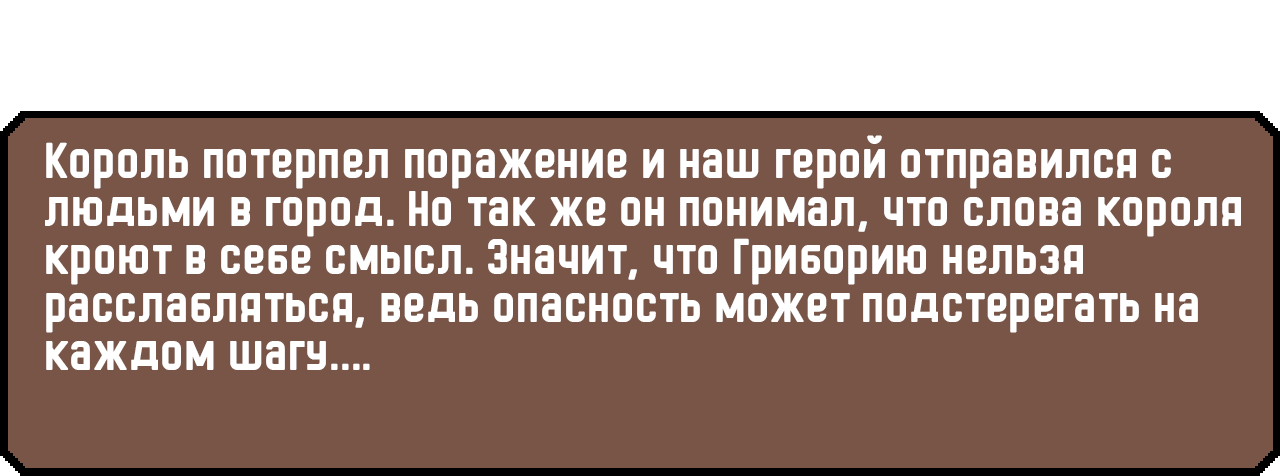
<style>
.page{position:relative;width:1280px;height:476px;background:#795548}
.page>*{position:absolute;margin:0}
.t1{font:48px/48px "HermanoMayor";color:#ffffff}
</style>
<div class="page">
<p class="t1" style="left:45px;top:135px;width:1196px;height:235px">Король потерпел поражение и наш герой отправился с людьми в город. Но так же он понимал, что слова короля кроют в себе смысл. Значит, что Гриборию нельзя расслабляться, ведь опасность может подстерегать на каждом шагу....</p>
</div>
